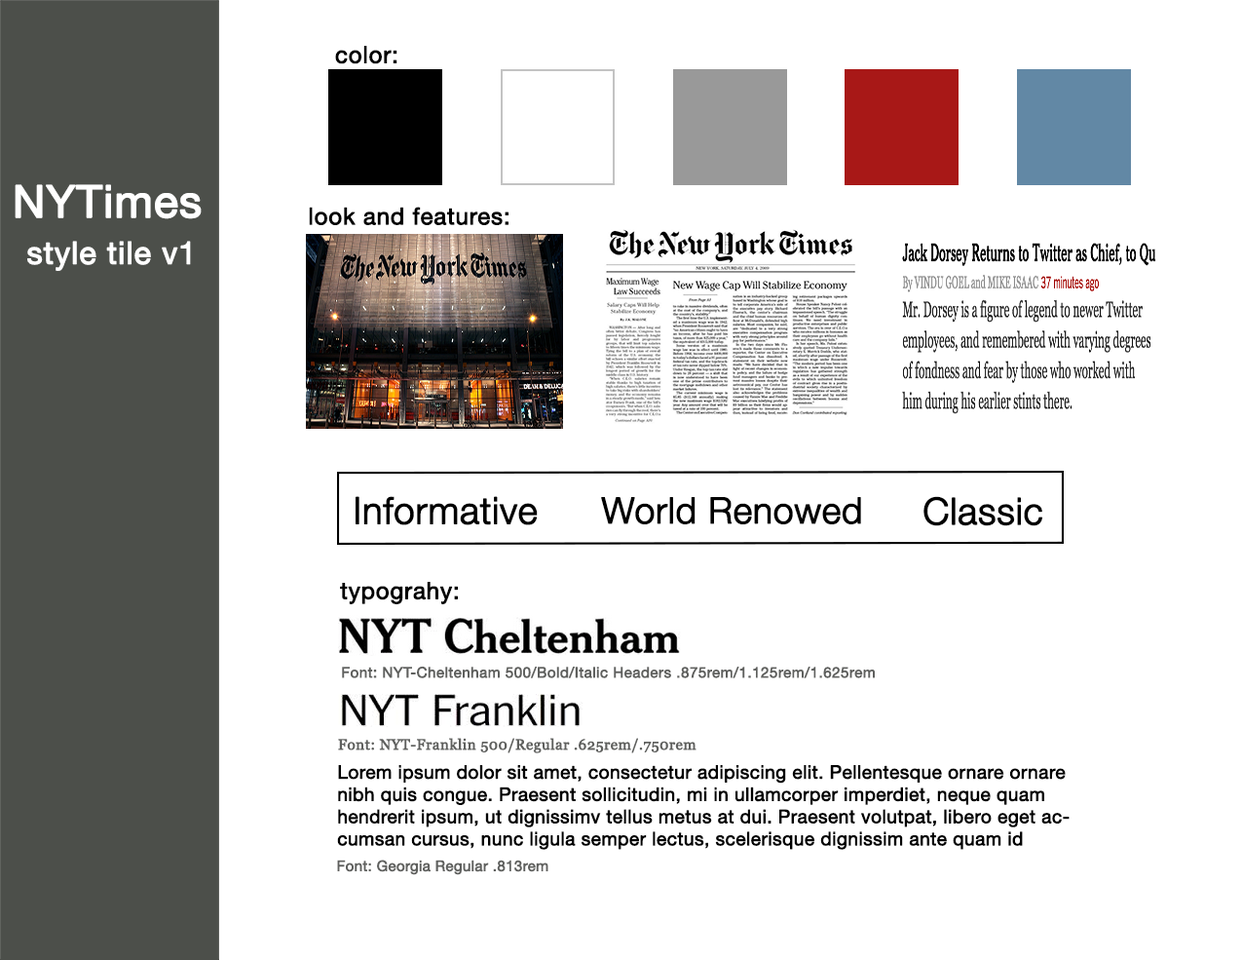
<style>
.page{position:relative;width:1242px;height:960px;background:#ffffff}
.page>*{position:absolute;margin:0}
.t1{font:23.4px "HelveticaNeue";letter-spacing:0.01em;color:#000000;font-weight:bold}
.t2{font:44.8px "HelveticaNeue";color:#ffffff;font-weight:bold}
.t3{font:46.8px "HelveticaNeue";color:#ffffff;font-weight:bold}
.t4{font:31.2px "HelveticaNeue";letter-spacing:0.01em;color:#ffffff;font-weight:bold}
.t5{font:37px "HelveticaNeue-Light";color:#000000;font-weight:bold}
.t6{font:36.1px "HelveticaNeue-Light";color:#000000;font-weight:bold}
.t7{font:14.6px "HelveticaNeue";letter-spacing:0.01em;color:#5f605e;font-weight:bold}
.t8{font:14.6px "Georgia";letter-spacing:0.01em;color:#5f605e;font-weight:bold}
.t9{font:18.5px "HelveticaNeue";color:#000000;font-weight:bold}
.t10{font:14.6px "HelveticaNeue";color:#5f605e;font-weight:bold}
</style>
<div class="page">
<p class="t1" style="left:335px;top:46px;width:63px;height:18px">color:</p>
<p class="t2" style="left:15px;top:184px;width:187px;height:35px"><span class="t3"><br></span>NYTimes</p>
<p class="t1" style="left:309px;top:207px;width:200px;height:18px">look and features:</p>
<p class="t4" style="left:27px;top:241px;width:164px;height:30px">style tile v1</p>
<p class="t5" style="left:356px;top:496px;width:182px;height:29px">Informative</p>
<p class="t6" style="left:601px;top:497px;width:260px;height:27px">World Renowed</p>
<p class="t5" style="left:924px;top:496px;width:119px;height:30px">Classic</p>
<p class="t1" style="left:340px;top:582px;width:118px;height:22px">typograhy:</p>
<p class="t7" style="left:342px;top:666px;width:533px;height:12px">Font: NYT-Cheltenham 500/Bold/Italic Headers .875rem/1.125rem/1.625rem</p>
<p class="t8" style="left:338px;top:738px;width:359px;height:15px">Font: NYT-Franklin 500/Regular .625rem/.750rem</p>
<p class="t9" style="left:337px;top:765px;width:733px;height:85px">Lorem ipsum dolor sit amet, consectetur adipiscing elit. Pellentesque ornare ornare nibh quis congue. Praesent sollicitudin, mi in ullamcorper imperdiet, neque quam hendrerit ipsum, ut dignissimv tellus metus at dui. Praesent volutpat, libero eget accumsan cursus, nunc ligula semper lectus, scelerisque dignissim ante quam id nunc. In commodo, ex id congue mattis.</p>
<p class="t10" style="left:337px;top:859px;width:212px;height:16px">Font: Georgia Regular .813rem</p>
</div>
